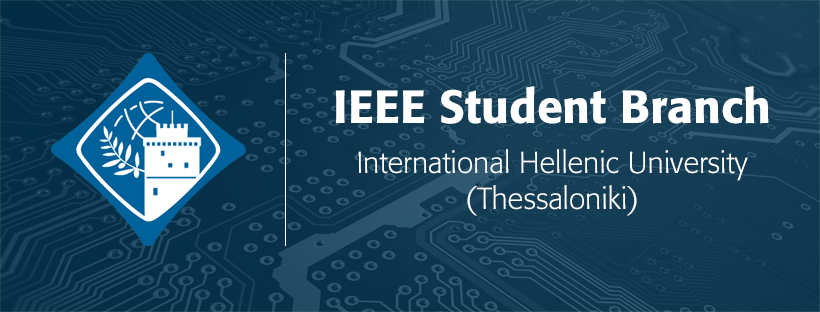
<style>
.page{position:relative;width:820px;height:312px}
.page>*{position:absolute;margin:0}
.t1{font:46px "Formata-Medium";color:#ffffff}
.t2{font:30px "Formata-Light";color:#ffffff}
</style>
<div class="page">
<p class="t1" style="left:335px;top:86px;width:434px;height:38px">IEEE Student Branch</p>
<p class="t2" style="left:358px;top:149px;width:390px;height:67px;text-align:center">International Hellenic University (Thessaloniki)</p>
</div>
